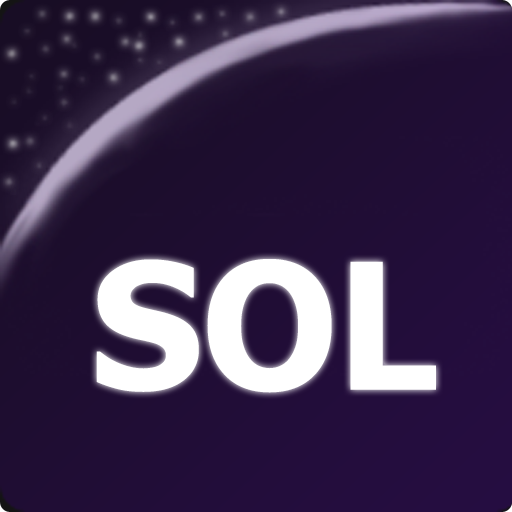
<style>
.page{position:relative;width:512px;height:512px}
.page>*{position:absolute;margin:0}
.t1{font:175.7px "Tahoma-Bold";color:#ffffff}
</style>
<div class="page">
<p class="t1" style="left:96px;top:259px;width:340px;height:134px">SOL</p>
</div>
